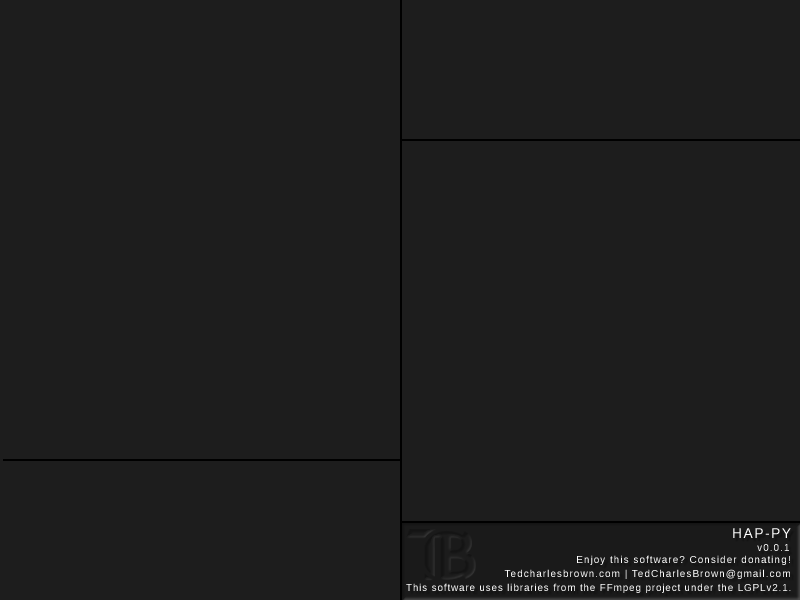
<style>
.page{position:relative;width:800px;height:600px;background:#1d1d1d}
.page>*{position:absolute;margin:0}
.t1{font:14px "LiberationSans";letter-spacing:0.1em;color:#ffffff}
.t2{font:10px "LiberationSans";letter-spacing:0.1em}
.t3{font:10px "LiberationSans";letter-spacing:0.1em;color:#ffffff}
.t4{font:10px "LiberationSans";letter-spacing:0.08em;color:#ffffff}
</style>
<div class="page">
<p class="t1" style="left:733px;top:528px;width:58px;height:10px">HAP-PY</p>
<p class="t2" style="left:757px;top:544px;width:32px;height:7px">v0.0.1</p>
<p class="t3" style="left:577px;top:555px;width:213px;height:10px">Enjoy this software? Consider donating!</p>
<p class="t3" style="left:504px;top:569px;width:286px;height:10px">Tedcharlesbrown.com | TedCharlesBrown@gmail.com</p>
<p class="t4" style="left:406px;top:583px;width:385px;height:10px">This software uses libraries from the FFmpeg project under the LGPLv2.1.</p>
</div>
